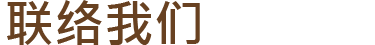
<style>
.page{position:relative;width:375px;height:45px;background:#ffffff}
.page>*{position:absolute;margin:0}
.t1{font:50px "MicrosoftJhengHeiBold";color:#684121}
</style>
<div class="page">
<p class="t1" style="left:7px;top:0px;width:193px;height:45px">联络我们</p>
</div>
